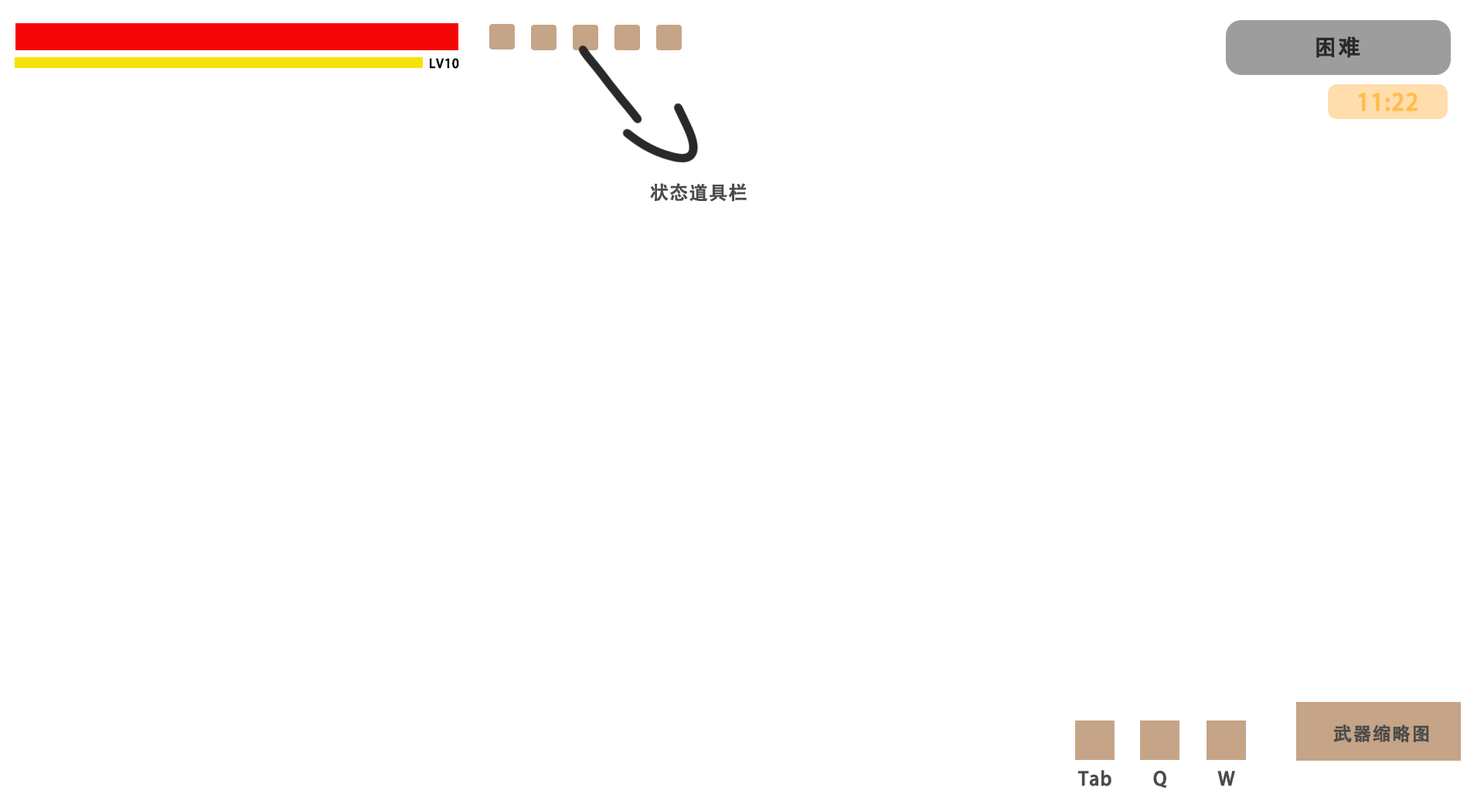
<style>
.page{position:relative;width:1484px;height:804px;background:#ffffff}
.page>*{position:absolute;margin:0}
.t1{font:22.7px "AdobeHeitiStd-Regular";letter-spacing:0.03em;color:#292929;font-weight:bold}
.t2{font:12.4px "AdobeHeitiStd-Regular";letter-spacing:0.03em;color:#000000;font-weight:bold}
.t3{font:22.7px "AdobeHeitiStd-Regular";letter-spacing:0.03em;color:#ffbd4a;font-weight:bold}
.t4{font:18.5px "AdobeHeitiStd-Regular";letter-spacing:0.03em;color:#4b4b4b;font-weight:bold}
</style>
<div class="page">
<p class="t1" style="left:1316px;top:36px;width:44px;height:22px">困难</p>
<p class="t2" style="left:430px;top:58px;width:29px;height:11px">LV10</p>
<p class="t3" style="left:1358px;top:93px;width:59px;height:18px">11:22</p>
<p class="t4" style="left:650px;top:183px;width:96px;height:19px">状态道具栏</p>
<p class="t4" style="left:1334px;top:724px;width:95px;height:19px">武器缩略图</p>
<p class="t4" style="left:1077px;top:770px;width:34px;height:16px">Tab</p>
<p class="t4" style="left:1153px;top:770px;width:13px;height:18px">Q</p>
<p class="t4" style="left:1217px;top:770px;width:18px;height:16px">W</p>
</div>
